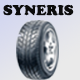
<style>
.page{position:relative;width:80px;height:80px}
.page>*{position:absolute;margin:0}
.t1{font:14px "CooperBlackStd";color:#0c0c0c}
</style>
<div class="page">
<p class="t1" style="left:3px;top:4px;width:71px;height:12px">SYNERIS</p>
</div>
